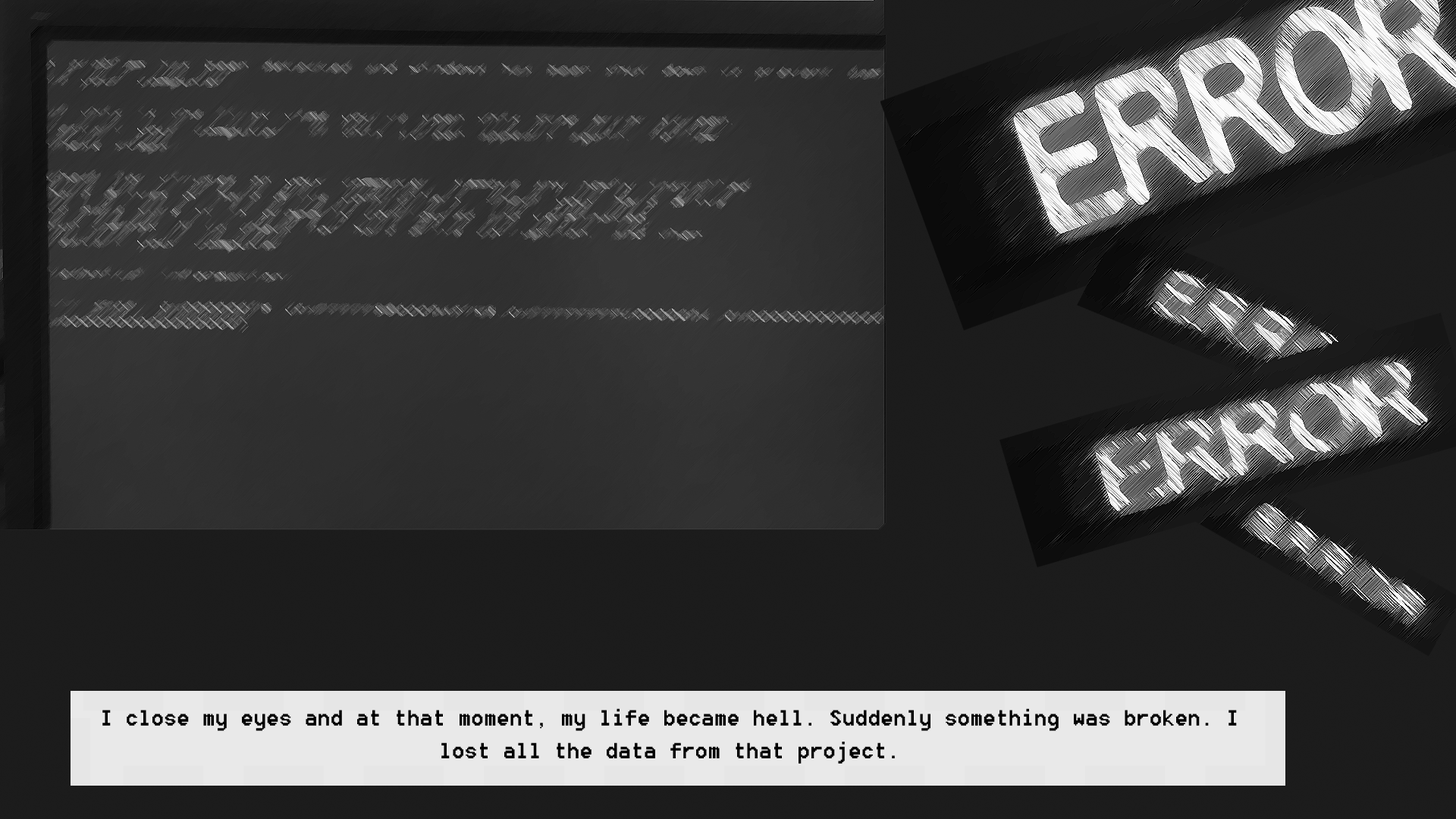
<style>
.page{position:relative;width:1456px;height:819px;background:#1c1c1c}
.page>*{position:absolute;margin:0}
.t1{font:27.3px "8514oem";color:#000000}
</style>
<div class="page">
<p class="t1" style="left:102px;top:708px;width:1135px;height:56px;text-align:center">I close my eyes and at that moment, my life became hell. Suddenly something was broken. I lost all the data from that project.</p>
</div>
